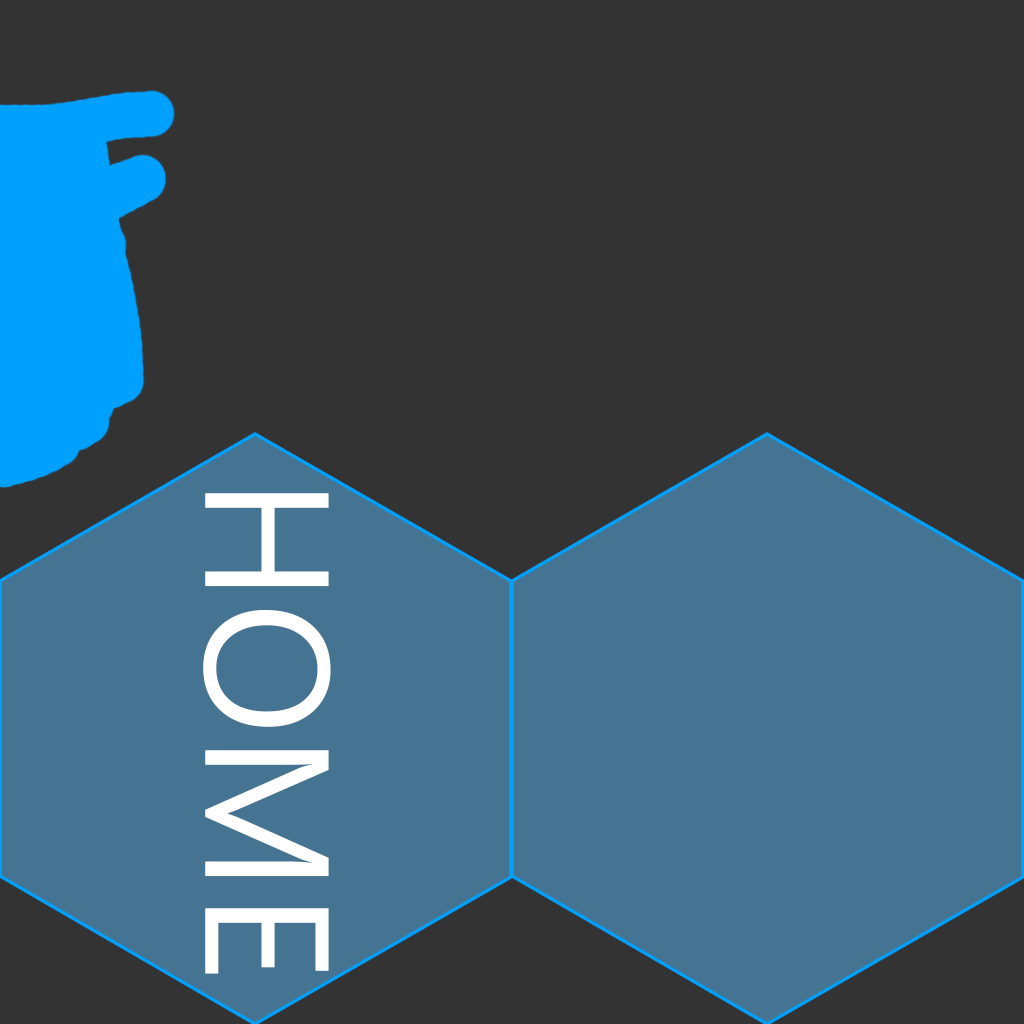
<style>
.page{position:relative;width:1024px;height:1024px;background:#333333}
.page>*{position:absolute;margin:0}
.t1{font:176px "SegoeUI";color:#ffffff}
</style>
<div class="page">
<p class="t1" style="left:203px;top:493px;width:128px;height:481px;rotate:90deg">HOME</p>
</div>
